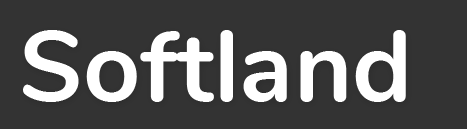
<style>
.page{position:relative;width:467px;height:129px;background:#333333}
.page>*{position:absolute;margin:0}
.t1{font:100px "Nunito-Bold";letter-spacing:0.002em;color:#ffffff}
</style>
<div class="page">
<p class="t1" style="left:23px;top:30px;width:383px;height:72px">Softland</p>
</div>
